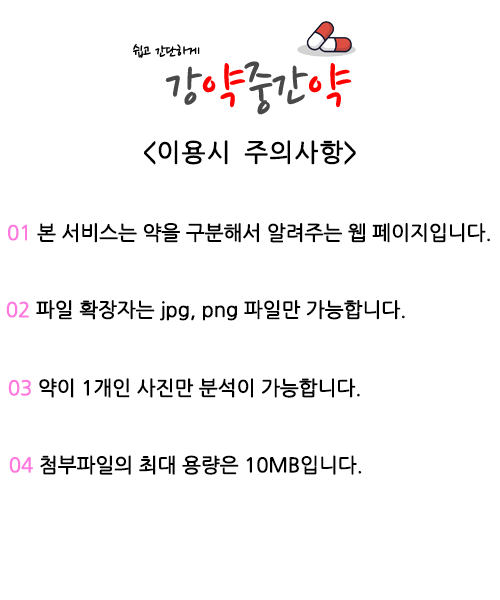
<style>
.page{position:relative;width:500px;height:600px;background:#ffffff}
.page>*{position:absolute;margin:0}
.t1{font:25px "NanumGothicCoding";letter-spacing:-0.025em;color:#000000;font-weight:bold}
.t2{font:20px "NanumGothicEco";letter-spacing:-0.025em;color:#000000;font-weight:bold}
.t3{font:20px "NanumGothicEco";letter-spacing:-0.025em;color:#ff79de;font-weight:bold}
</style>
<div class="page">
<p class="t1" style="left:144px;top:140px;width:212px;height:25px">&lt;이용시 주의사항&gt;</p>
<p class="t2" style="left:8px;top:223px;width:482px;height:20px"><span class="t3">01 </span>본 서비스는 약을 구분해서 알려주는 웹 페이지입니다.</p>
<p class="t2" style="left:6px;top:300px;width:399px;height:21px"><span class="t3">02</span> 파일 확장자는 jpg, png 파일만 가능합니다.</p>
<p class="t2" style="left:8px;top:378px;width:352px;height:20px"><span class="t3">03 </span>약이 1개인 사진만 분석이 가능합니다.</p>
<p class="t2" style="left:9px;top:455px;width:353px;height:20px"><span class="t3">04 </span>첨부파일의 최대 용량은 10MB입니다.</p>
</div>
